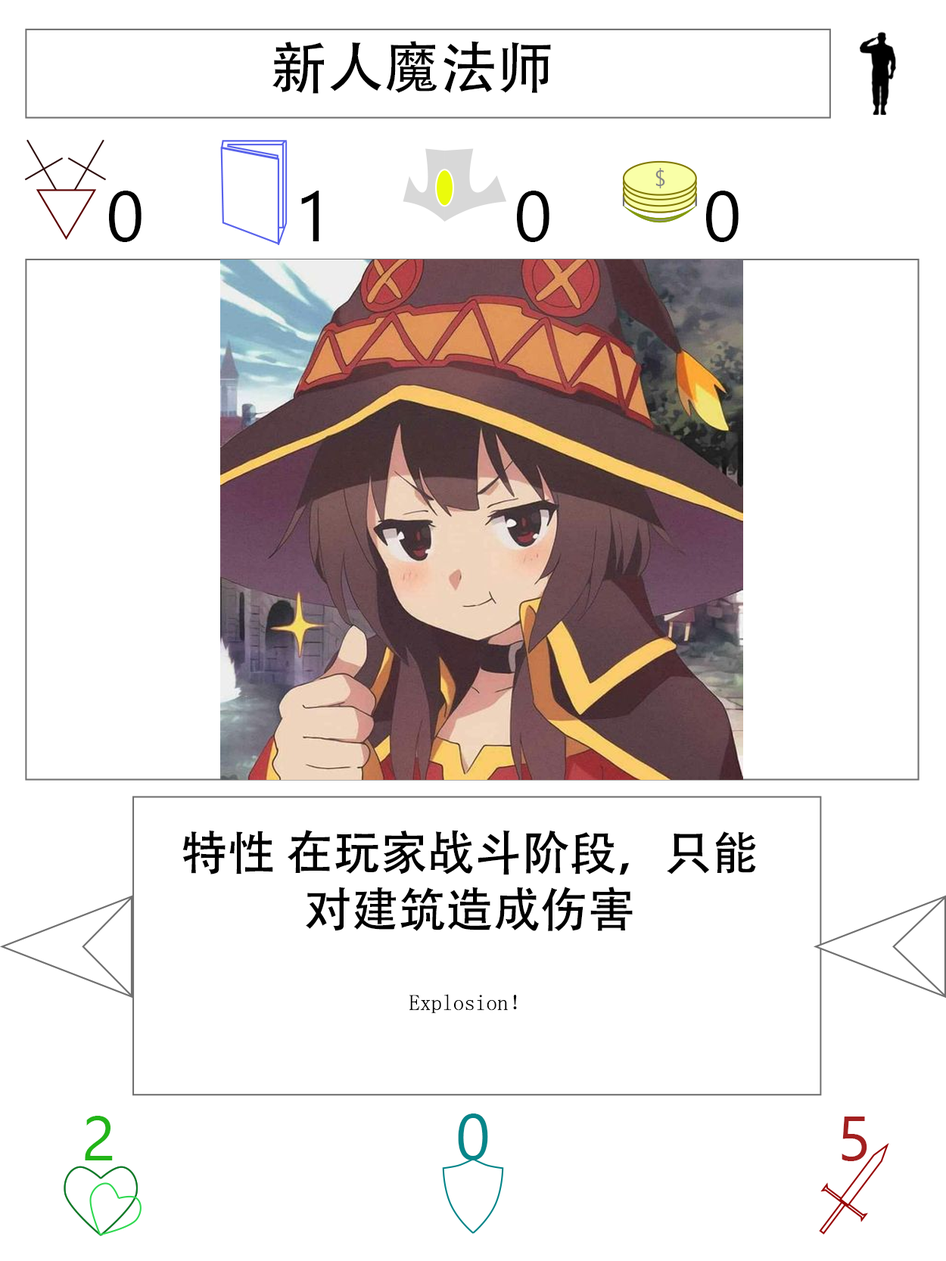
<style>
.page{position:relative;width:946px;height:1261px;background:#ffffff}
.page>*{position:absolute;margin:0}
.t1{font:56.7px "AdobeHeitiStd-Regular";color:#000000}
.t2{font:70.9px "SegoeUI";color:#000000}
.t3{font:47.3px "AdobeHeitiStd-Regular";color:#000000}
.t4{font:22.1px "NSimSun";color:#000000}
.t5{font:63px "SegoeUI";color:#22b518}
.t6{font:64.6px "SegoeUI";color:#05868a}
.t7{font:63px "SegoeUI";color:#a32020}
</style>
<div class="page">
<p class="t1" style="left:272px;top:41px;width:279px;height:53px">新人魔法师</p>
<p class="t2" style="left:109px;top:191px;width:32px;height:51px">0</p>
<p class="t2" style="left:301px;top:191px;width:18px;height:50px">1</p>
<p class="t2" style="left:517px;top:191px;width:32px;height:51px">0</p>
<p class="t2" style="left:706px;top:191px;width:32px;height:51px">0</p>
<p class="t3" style="left:182px;top:830px;width:574px;height:184px;text-align:center">特性 在玩家战斗阶段，只能对建筑造成伤害<br><br><span class="t4">Explosion！</span></p>
<p class="t5" style="left:85px;top:1116px;width:28px;height:44px">2</p>
<p class="t6" style="left:458px;top:1114px;width:30px;height:46px">0</p>
<p class="t7" style="left:841px;top:1117px;width:26px;height:44px">5</p>
</div>
